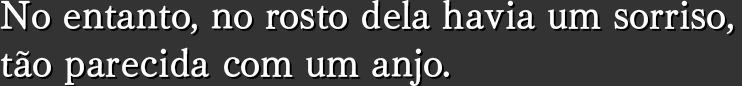
<style>
.page{position:relative;width:742px;height:86px;background:#333333}
.page>*{position:absolute;margin:0}
.t1{font:38.7px/48px "TelopMinPro-D";color:#ffffff}
</style>
<div class="page">
<p class="t1" style="left:0px;top:0px;width:733px;height:86px">No entanto, no rosto dela havia um sorriso,<br>tão parecida com um anjo.</p>
</div>
